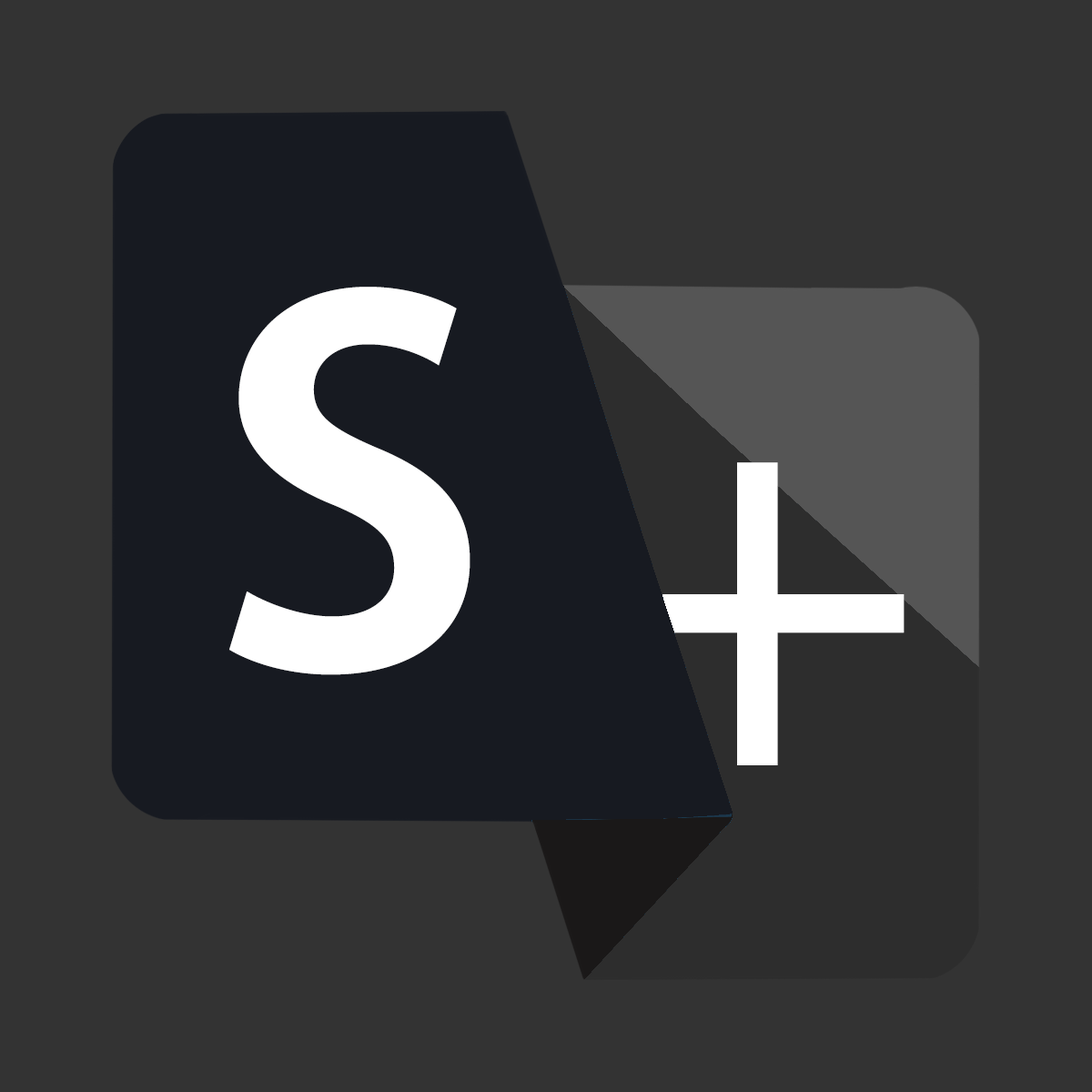
<style>
.page{position:relative;width:1092px;height:1092px;background:#333333}
.page>*{position:absolute;margin:0}
.t1{font:674.9px "AdobeHeitiStd-Regular";color:#ffffff}
.t2{font:500.5px "AdobeHeitiStd-Regular";color:#ffffff}
</style>
<div class="page">
<p class="t1" style="left:229px;top:287px;width:241px;height:388px">s</p>
<p class="t2" style="left:610px;top:462px;width:295px;height:303px">+</p>
</div>
